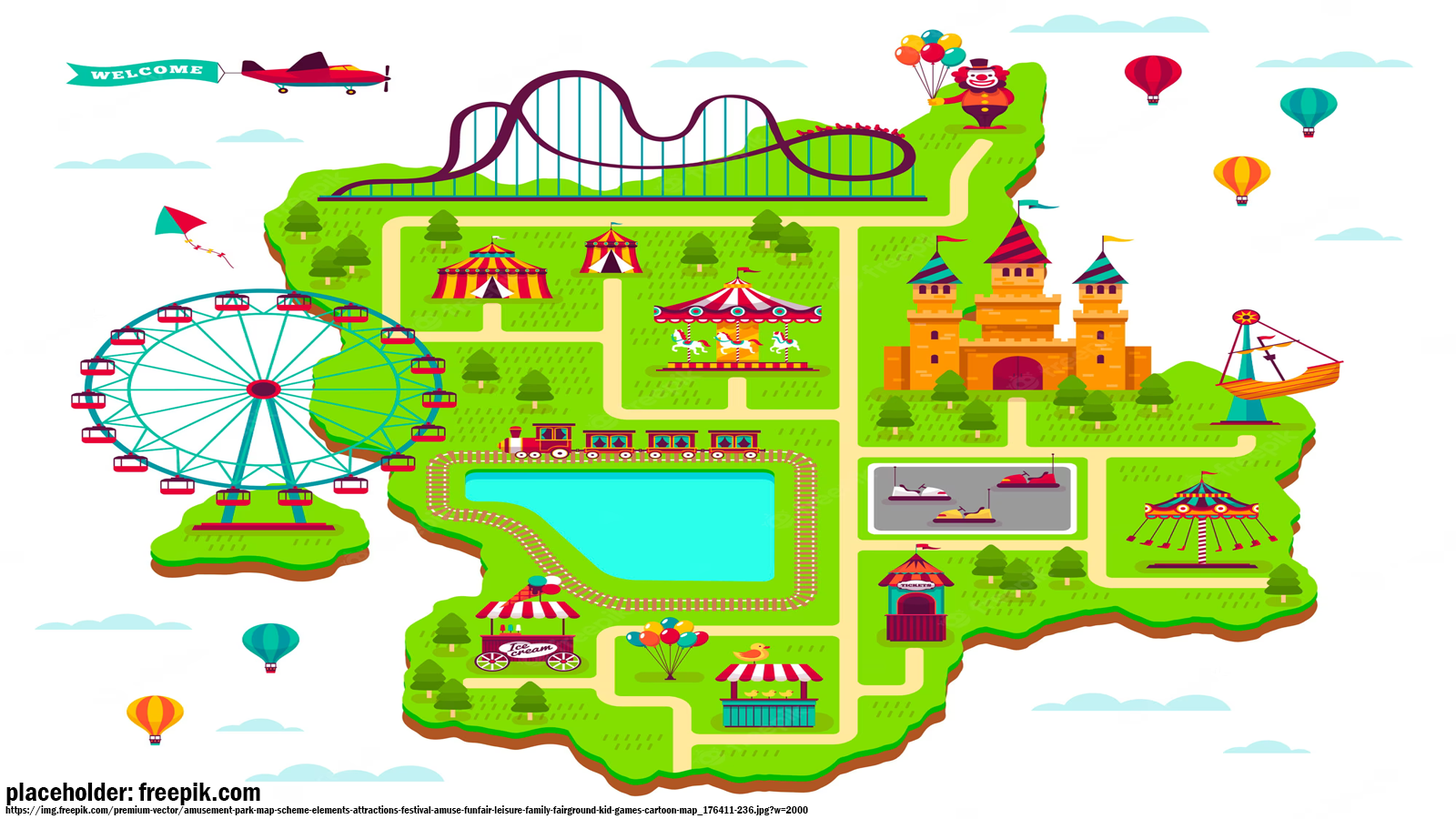
<style>
.page{position:relative;width:1456px;height:819px;background:#ffffff}
.page>*{position:absolute;margin:0}
.t1{font:10.9px "FranklinGothic-DemiCond";letter-spacing:-0.005em;color:#000000}
.t2{font:27.1px "FranklinGothic-DemiCond";letter-spacing:-0.005em;color:#000000}
</style>
<div class="page">
<p class="t1" style="left:5px;top:783px;width:803px;height:32px"><span class="t2">placeholder: freepik.com<br></span>https://img.freepik.com/premium-vector/amusement-park-map-scheme-elements-attractions-festival-amuse-funfair-leisure-family-fairground-kid-games-cartoon-map_176411-236.jpg?w=2000</p>
</div>
